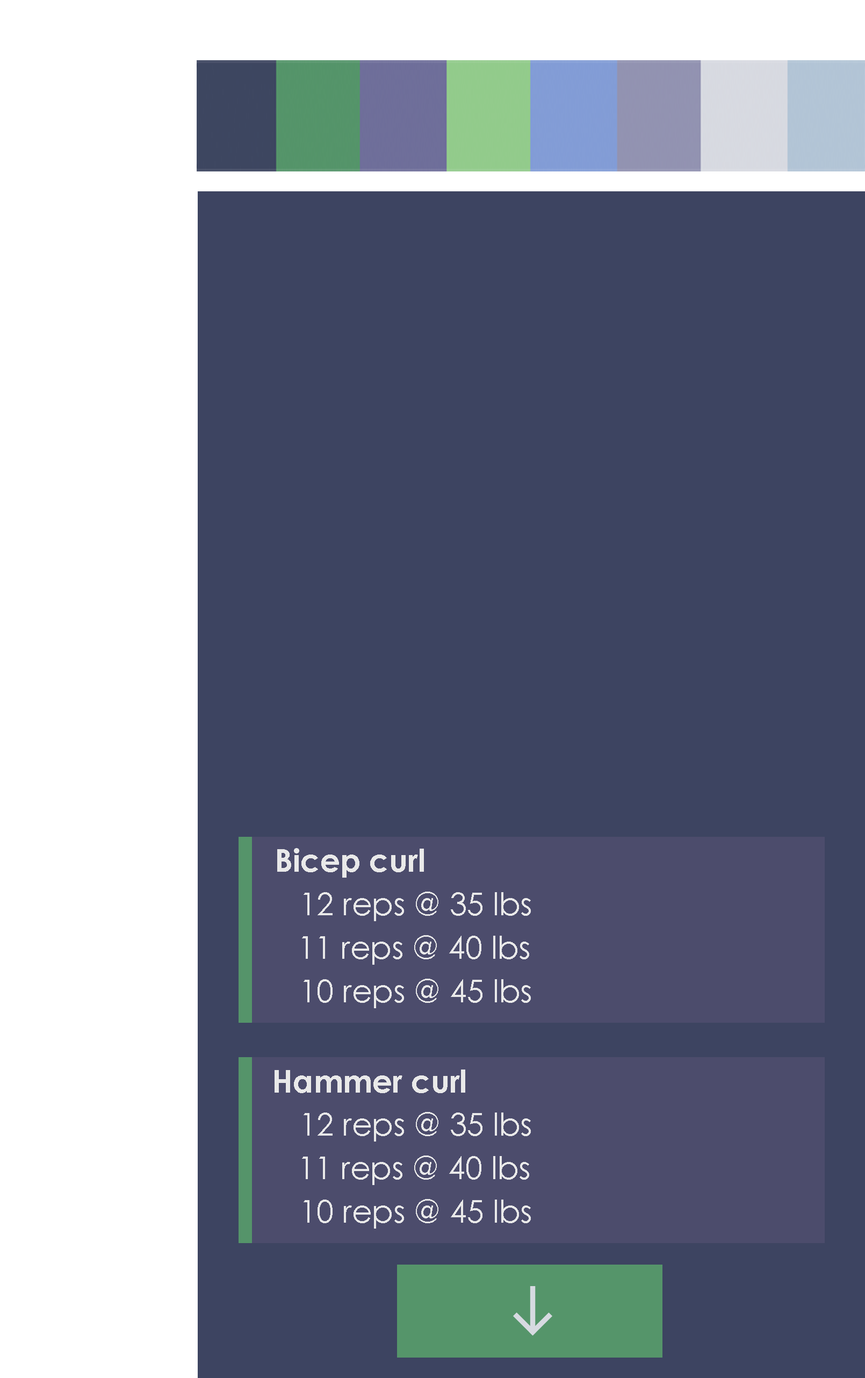
<style>
.page{position:relative;width:865px;height:1378px;background:#3d4461}
.page>*{position:absolute;margin:0}
.t1{font:31.2px "CenturyGothic-Bold";color:#e9e9e9}
.t2{font:31.2px "CenturyGothic";color:#e9e9e9}
</style>
<div class="page">
<p class="t1" style="left:277px;top:848px;width:147px;height:30px">Bicep curl</p>
<p class="t2" style="left:304px;top:892px;width:227px;height:29px">12 reps @ 35 lbs</p>
<p class="t2" style="left:302px;top:935px;width:227px;height:30px">11 reps @ 40 lbs</p>
<p class="t2" style="left:304px;top:979px;width:227px;height:29px">10 reps @ 45 lbs</p>
<p class="t1" style="left:275px;top:1070px;width:190px;height:23px">Hammer curl</p>
<p class="t2" style="left:304px;top:1112px;width:227px;height:30px">12 reps @ 35 lbs</p>
<p class="t2" style="left:302px;top:1156px;width:227px;height:29px">11 reps @ 40 lbs</p>
<p class="t2" style="left:304px;top:1199px;width:227px;height:30px">10 reps @ 45 lbs</p>
</div>
